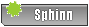
<style>
.page{position:relative;width:89px;height:27px;background:#ffffff}
.page>*{position:absolute;margin:0}
.t1{font:14px "Impact";color:#ffffff}
</style>
<div class="page">
<p class="t1" style="left:35px;top:9px;width:37px;height:12px">Sphinn</p>
</div>
